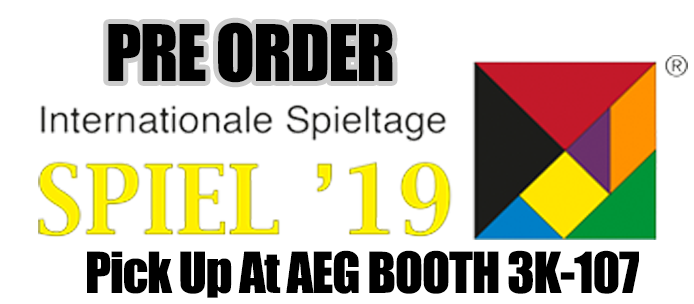
<style>
.page{position:relative;width:694px;height:304px;background:#ffffff}
.page>*{position:absolute;margin:0}
.t1{font:72px "Impact";letter-spacing:-0.025em;color:#000000}
.t2{font:52px "Impact";letter-spacing:-0.025em;color:#000000}
</style>
<div class="page">
<p class="t1" style="left:108px;top:22px;width:285px;height:61px">PRE ORDER</p>
<p class="t2" style="left:87px;top:250px;width:552px;height:48px">Pick Up At AEG BOOTH 3K-107</p>
</div>
